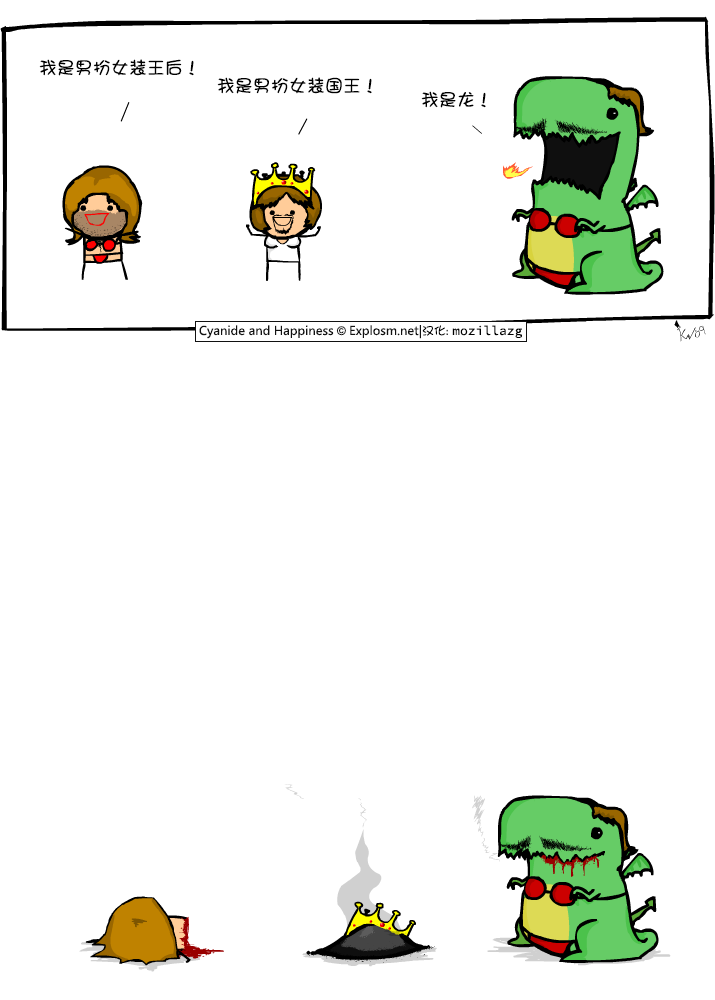
<style>
.page{position:relative;width:715px;height:1000px;background:#ffffff}
.page>*{position:absolute;margin:0}
.t1{font:18px "DFGirl";color:#000000}
</style>
<div class="page">
<p class="t1" style="left:39px;top:59px;width:155px;height:17px">我是男扮女装王后！</p>
<p class="t1" style="left:217px;top:77px;width:155px;height:17px">我是男扮女装国王！</p>
<p class="t1" style="left:421px;top:91px;width:65px;height:17px">我是龙！</p>
</div>
